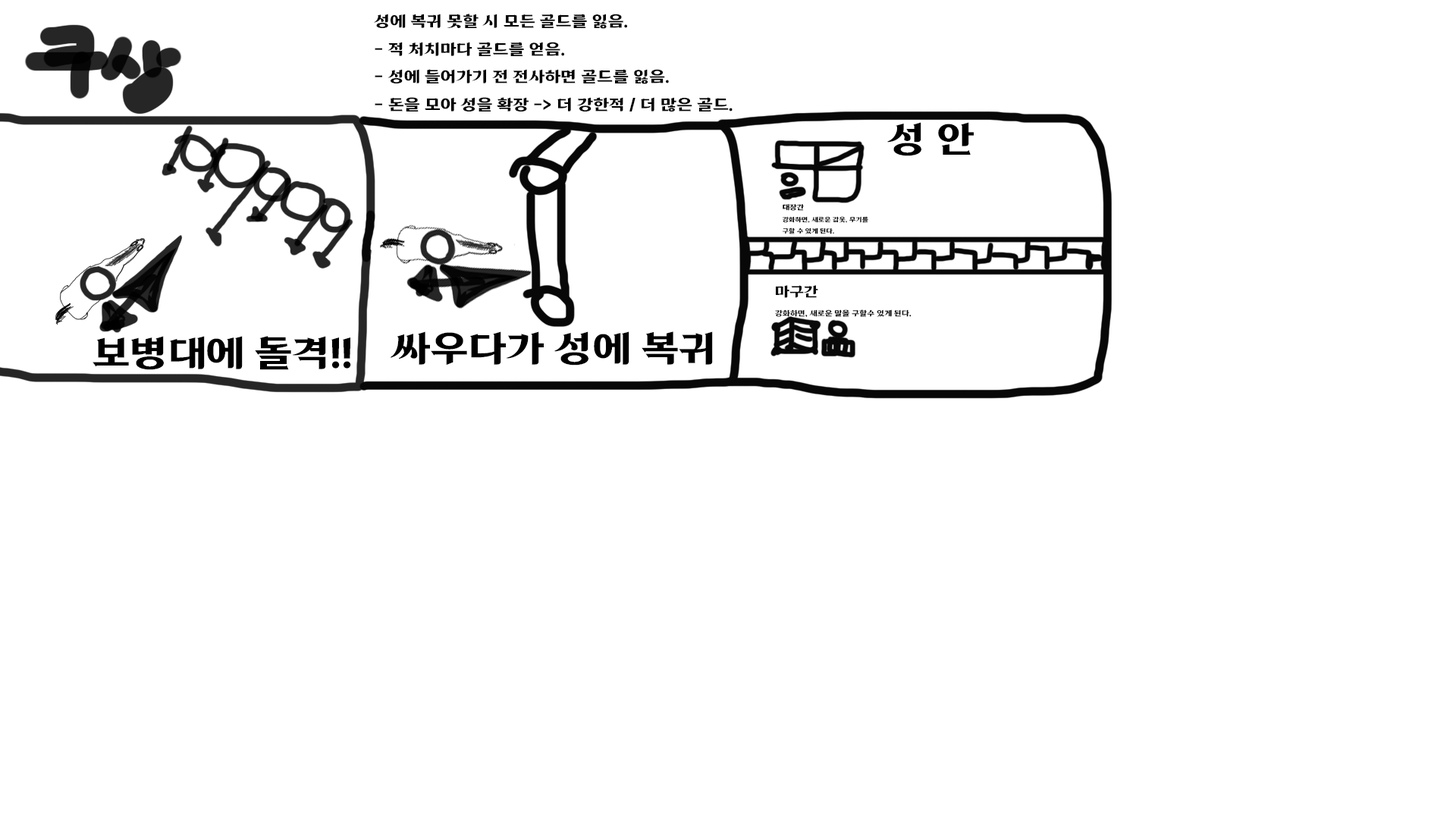
<style>
.page{position:relative;width:1456px;height:819px;background:#ffffff}
.page>*{position:absolute;margin:0}
.t1{font:15.9px "62570";color:#000000}
.t2{font:37.9px "62570";color:#000000}
.t3{font:6.4px "62570";color:#000000}
.t4{font:7.2px "62570";color:#000000}
.t5{font:7.6px "62570";color:#090909}
.t6{font:14.4px "62570";color:#090909}
</style>
<div class="page">
<p class="t1" style="left:374px;top:14px;width:359px;height:98px">성에 복귀 못할 시 모든 골드를 잃음.<br>- 적 처치마다 골드를 얻음.<br>- 성에 들어가기 전 전사하면 골드를 잃음.<br>- 돈을 모아 성을 확장 -&gt; 더 강한적 / 더 많은 골드.</p>
<p class="t2" style="left:887px;top:122px;width:87px;height:34px">성 안</p>
<p class="t3" style="left:782px;top:204px;width:86px;height:30px"><span class="t4">대장간<br></span>강화하면, 새로운 갑옷, 무기를 <br>구할 수 있게 된다.</p>
<p class="t5" style="left:775px;top:285px;width:137px;height:33px"><span class="t6">마구간<br></span>강화하면, 새로운 말을 구할수 있게 된다.</p>
<p class="t2" style="left:93px;top:336px;width:258px;height:34px">보병대에 돌격!!</p>
<p class="t2" style="left:391px;top:331px;width:322px;height:35px">싸우다가 성에 복귀</p>
</div>
